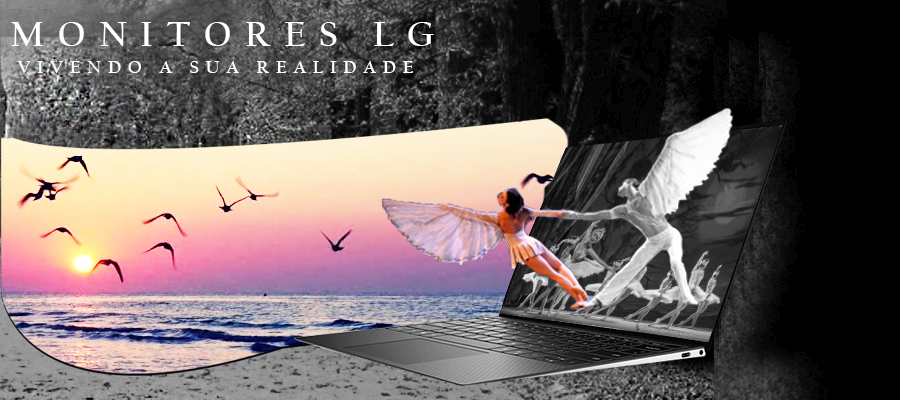
<style>
.page{position:relative;width:900px;height:400px}
.page>*{position:absolute;margin:0}
.t1{font:36px "CalifornianFB-Bold";letter-spacing:0.38em;color:#ffffff;text-transform:uppercase}
.t2{font:18px "CalifornianFB-Bold";letter-spacing:0.38em;color:#ffffff;text-transform:uppercase}
</style>
<div class="page">
<p class="t1" style="left:11px;top:22px;width:423px;height:24px">MONITORES LG</p>
<p class="t2" style="left:17px;top:61px;width:397px;height:12px">vivendo a sua realidade</p>
</div>
